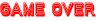
<style>
.page{position:relative;width:96px;height:21px;background:#ffffff}
.page>*{position:absolute;margin:0}
.t1{font:16.3px "PorterSansBlock";letter-spacing:-0.005em;color:#ff0202;font-weight:bold;scale:0.59 1}
</style>
<div class="page">
<p class="t1" style="left:0px;top:2px;width:96px;height:15px">Game over</p>
</div>
